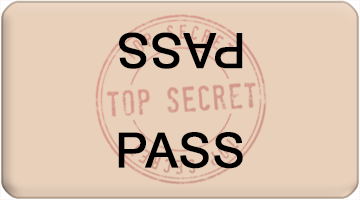
<style>
.page{position:relative;width:360px;height:200px;background:#e8d0bb}
.page>*{position:absolute;margin:0}
.t1{font:48px "ArialMT";color:#000000;font-weight:bold}
</style>
<div class="page">
<p class="t1" style="left:119px;top:32px;width:124px;height:37px;rotate:180deg">PASS</p>
<p class="t1" style="left:118px;top:132px;width:125px;height:37px">PASS</p>
</div>
